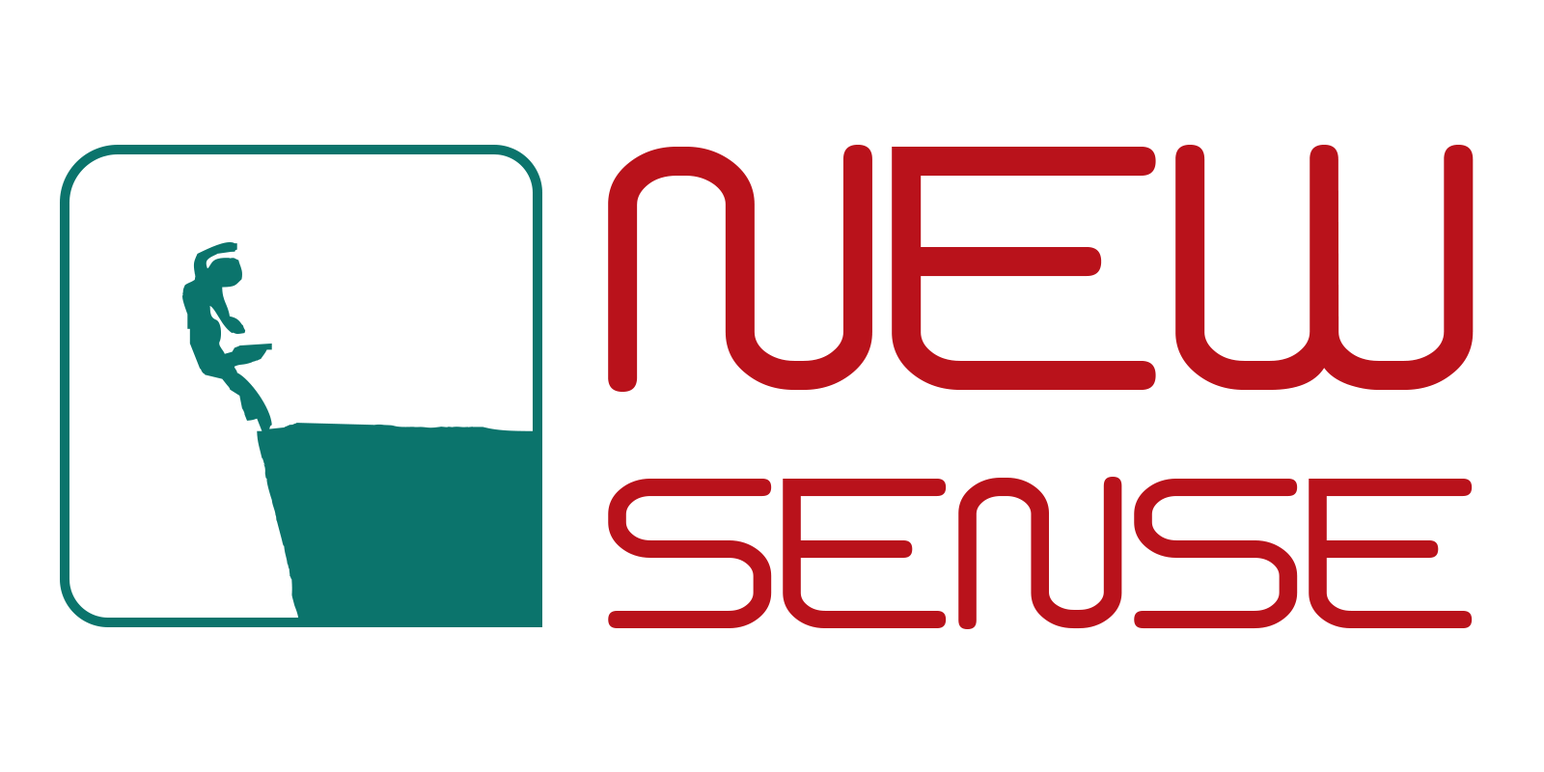
<style>
.page{position:relative;width:1544px;height:772px;background:#ffffff}
.page>*{position:absolute;margin:0}
.t1{font:328.2px "Phantomcyr-lat";color:#b9121b}
.t2{font:202.7px "Phantomcyr-lat";color:#b9121b}
</style>
<div class="page">
<p class="t1" style="left:608px;top:145px;width:866px;height:247px">NEW</p>
<p class="t2" style="left:608px;top:477px;width:865px;height:152px">SENSE</p>
</div>
